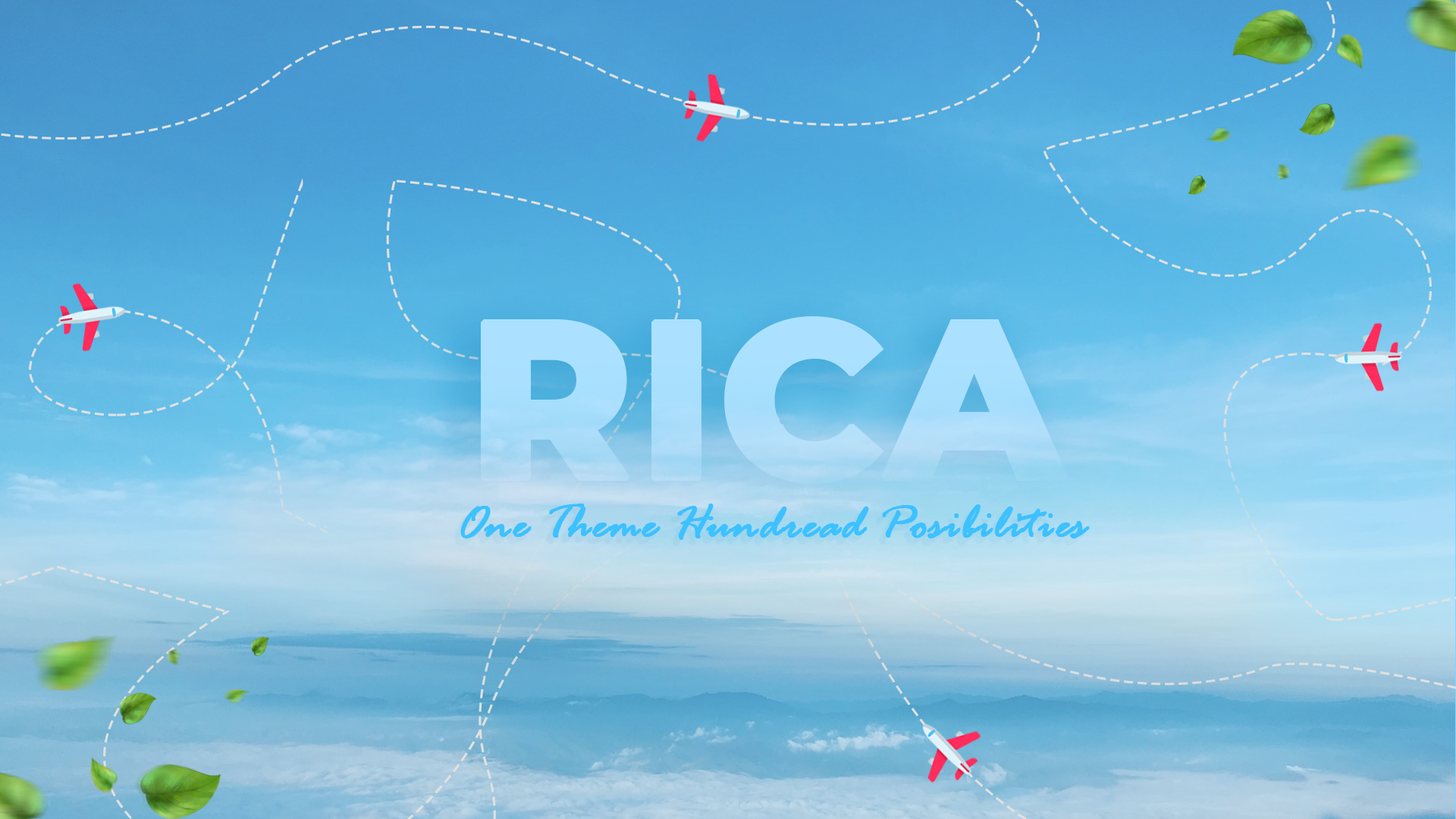
<style>
.page{position:relative;width:1456px;height:819px}
.page>*{position:absolute;margin:0}
.t1{font:222.2px "Montserrat-ExtraBold";color:#aadffc;font-weight:bold}
.t2{font:49.3px "RageItalic";color:#3dc1ff;font-weight:bold}
</style>
<div class="page">
<p class="t1" style="left:481px;top:316px;width:587px;height:168px">RICA</p>
<p class="t2" style="left:460px;top:504px;width:630px;height:36px">One Theme Hundread Posibilities</p>
</div>
